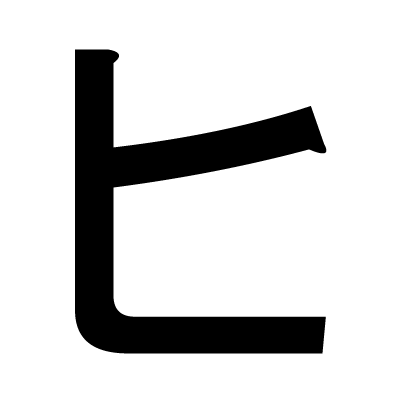
<style>
.page{position:relative;width:400px;height:400px;background:#ffffff}
.page>*{position:absolute;margin:0}
.t1{font:424.8px "MS-PGothic";color:#000000}
</style>
<div class="page">
<p class="t1" style="left:75px;top:49px;width:252px;height:305px">ヒ</p>
</div>
